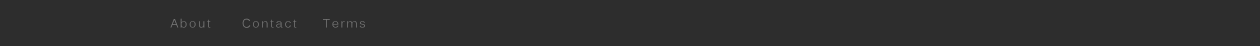
<style>
.page{position:relative;width:1260px;height:46px;background:#2d2d2d}
.page>*{position:absolute;margin:0}
.t1{font:12px "Kalinga";letter-spacing:0.14em;color:#767676}
</style>
<div class="page">
<p class="t1" style="left:170px;top:18px;width:195px;height:10px">About      Contact     Terms</p>
</div>
